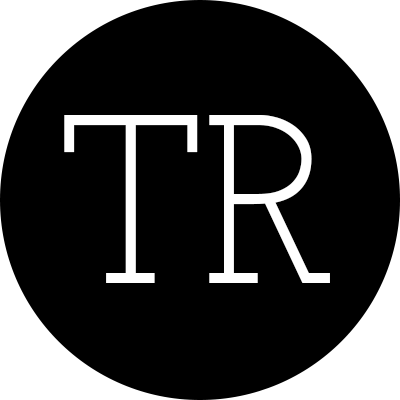
<style>
.page{position:relative;width:400px;height:400px;background:#000000}
.page>*{position:absolute;margin:0}
.t1{font:240.4px "JosefinSlab";color:#ffffff}
</style>
<div class="page">
<p class="t1" style="left:64px;top:115px;width:266px;height:168px">TR</p>
</div>
